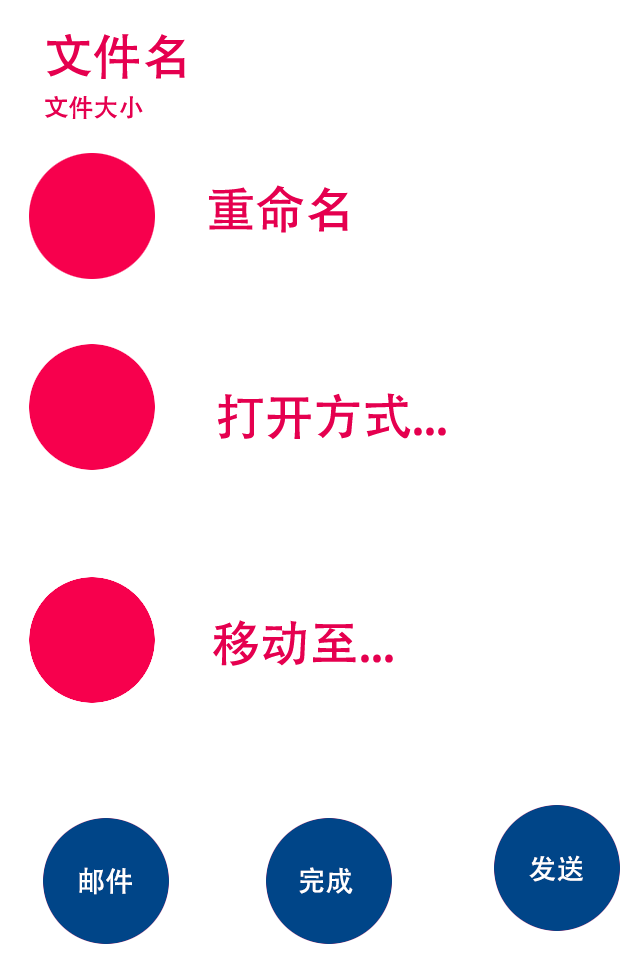
<style>
.page{position:relative;width:640px;height:960px;background:#ffffff}
.page>*{position:absolute;margin:0}
.t1{font:49px "AdobeHeitiStd-Regular";color:#e5004f}
.t2{font:25px "AdobeHeitiStd-Regular";color:#e5004f}
.t3{font:28px "AdobeHeitiStd-Regular";color:#ffffff}
</style>
<div class="page">
<p class="t1" style="left:47px;top:34px;width:138px;height:45px">文件名</p>
<p class="t2" style="left:45px;top:96px;width:98px;height:23px">文件大小</p>
<p class="t1" style="left:209px;top:185px;width:139px;height:48px">重命名</p>
<p class="t1" style="left:218px;top:393px;width:228px;height:47px">打开方式...</p>
<p class="t1" style="left:213px;top:620px;width:180px;height:46px">移动至...</p>
<p class="t3" style="left:529px;top:855px;width:54px;height:27px">发送</p>
<p class="t3" style="left:79px;top:867px;width:53px;height:28px">邮件</p>
<p class="t3" style="left:299px;top:867px;width:54px;height:27px">完成</p>
</div>
